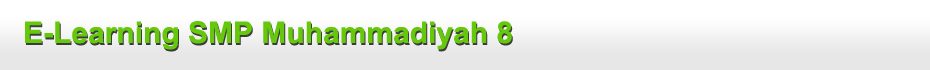
<style>
.page{position:relative;width:930px;height:70px;background:#ffffff}
.page>*{position:absolute;margin:0}
.t1{font:30px "Arial-BoldMT";color:#65c80b}
</style>
<div class="page">
<p class="t1" style="left:25px;top:21px;width:487px;height:29px">E-Learning SMP Muhammadiyah 8</p>
</div>
